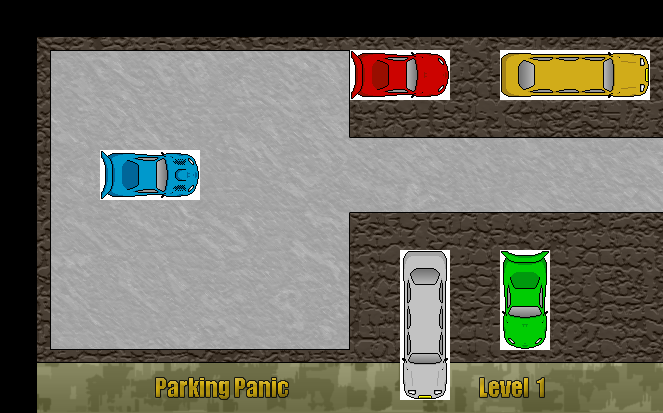
<style>
.page{position:relative;width:663px;height:413px}
.page>*{position:absolute;margin:0}
.t1{font:24px "Impact"}
</style>
<div class="page">
<p class="t1" style="left:156px;top:378px;width:388px;height:21px">Parking Panic      Level  1</p>
</div>
